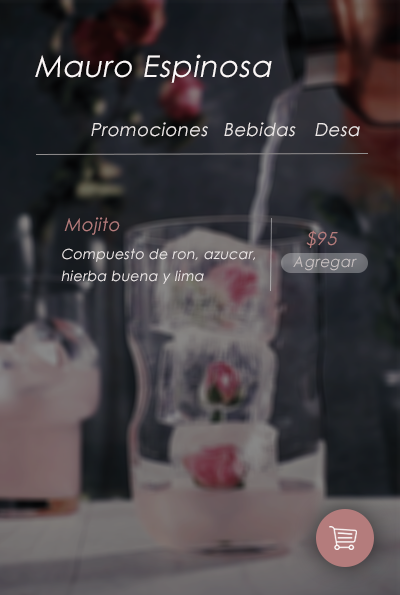
<style>
.page{position:relative;width:400px;height:595px}
.page>*{position:absolute;margin:0}
.t1{font:30px "CenturyGothic";letter-spacing:0.025em;color:#fbf7f7;font-style:italic}
.t2{font:18px "CenturyGothic";letter-spacing:0.025em;color:#ece7e7;font-style:italic}
.t3{font:18px "CenturyGothic";letter-spacing:0.025em;color:#b47c7c;font-style:italic}
.t4{font:14px/11px "CenturyGothic";letter-spacing:0.025em;color:#ece7e7;font-style:italic}
.t5{font:15px "CenturyGothic";letter-spacing:0.025em;color:#c8c1c1;font-style:italic}
</style>
<div class="page">
<p class="t1" style="left:35px;top:54px;width:237px;height:29px">Mauro Espinosa</p>
<p class="t2" style="left:91px;top:122px;width:117px;height:15px">Promociones</p>
<p class="t2" style="left:224px;top:122px;width:72px;height:15px">Bebidas</p>
<p class="t2" style="left:315px;top:123px;width:45px;height:14px">Desa</p>
<p class="t3" style="left:64px;top:217px;width:56px;height:18px">Mojito</p>
<p class="t3" style="left:306px;top:230px;width:32px;height:18px">$95</p>
<p class="t4" style="left:61px;top:248px;width:194px;height:36px;text-align:justify">Compuesto de ron, azucar, <br><br>hierba buena y lima</p>
<p class="t5" style="left:293px;top:256px;width:64px;height:15px">Agregar</p>
</div>
